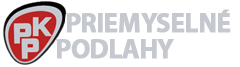
<style>
.page{position:relative;width:240px;height:67px;background:#ffffff}
.page>*{position:absolute;margin:0}
.t1{font:27px "MyriadPro-Bold";letter-spacing:-0.035em;color:#c5c8cf;text-transform:uppercase;font-weight:bold}
.t2{font:27px "MyriadPro-Bold";letter-spacing:-0.04em;color:#c5c8cf;text-transform:uppercase;font-weight:bold}
</style>
<div class="page">
<p class="t1" style="left:67px;top:9px;width:164px;height:24px">Priemyselné</p>
<p class="t2" style="left:57px;top:39px;width:117px;height:20px">Podlahy</p>
</div>
